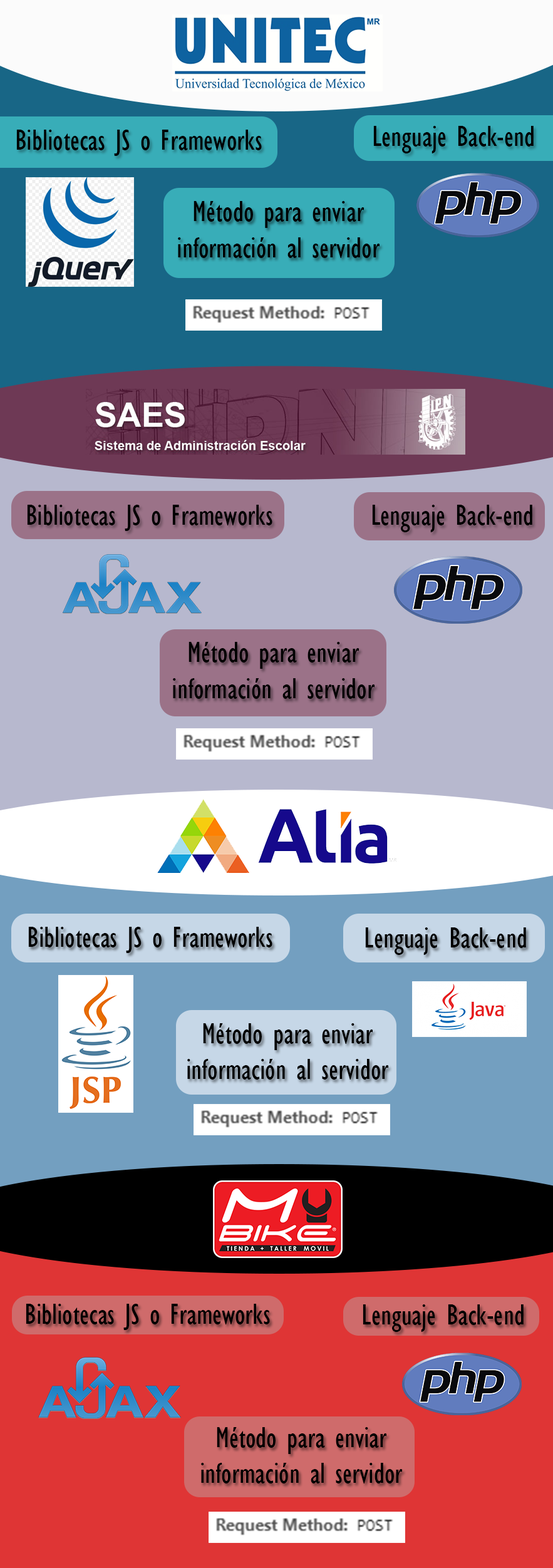
<style>
.page{position:relative;width:553px;height:1568px}
.page>*{position:absolute;margin:0}
.t1{font:30.1px "GillSansMT-Condensed";color:#000000}
</style>
<div class="page">
<p class="t1" style="left:373px;top:126px;width:161px;height:27px">Lenguaje Back-end</p>
<p class="t1" style="left:16px;top:130px;width:246px;height:26px">Bibliotecas JS o Frameworks</p>
<p class="t1" style="left:178px;top:201px;width:202px;height:57px;text-align:center">Método para enviar información al servidor</p>
<p class="t1" style="left:27px;top:505px;width:245px;height:26px">Bibliotecas JS o Frameworks</p>
<p class="t1" style="left:372px;top:505px;width:160px;height:27px">Lenguaje Back-end</p>
<p class="t1" style="left:173px;top:642px;width:202px;height:57px;text-align:center">Método para enviar información al servidor</p>
<p class="t1" style="left:28px;top:927px;width:244px;height:26px">Bibliotecas JS o Frameworks</p>
<p class="t1" style="left:365px;top:927px;width:161px;height:28px">Lenguaje Back-end</p>
<p class="t1" style="left:187px;top:1023px;width:202px;height:57px;text-align:center">Método para enviar información al servidor</p>
<p class="t1" style="left:26px;top:1304px;width:244px;height:26px">Bibliotecas JS o Frameworks</p>
<p class="t1" style="left:363px;top:1304px;width:161px;height:28px">Lenguaje Back-end</p>
<p class="t1" style="left:201px;top:1427px;width:202px;height:56px;text-align:center">Método para enviar información al servidor</p>
</div>
